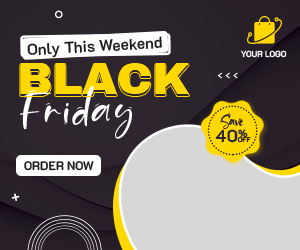
<style>
.page{position:relative;width:300px;height:250px;background:#d7d7d7}
.page>*{position:absolute;margin:0}
.t1{font:15.6px "K2D-SemiBold";color:#1d1a1c}
.t2{font:8.7px "K2D-Bold";color:#ffffff;scale:0.96 1}
.t3{font:45px "ArchivoBlack-Regular";color:#ffd800}
.t4{font:55.4px "Sand-Beach";letter-spacing:0.055em;color:#ffffff}
.t5{font:17.3px "Sand-Beach";color:#2f2730}
.t6{font:17.3px "K2D-Bold";color:#2f2730}
.t7{font:6.9px "K2D-Bold";color:#2f2730}
.t8{font:12.2px "K2D-SemiBold";color:#1d1a1c}
</style>
<div class="page">
<p class="t1" style="left:27px;top:36px;width:135px;height:22px;rotate:-3deg">Only This Weekend</p>
<p class="t2" style="left:241px;top:50px;width:46px;height:8px">YOUR LOGO</p>
<p class="t3" style="left:20px;top:63px;width:169px;height:31px">BLACK</p>
<p class="t3" style="left:20px;top:65px;width:169px;height:31px">BLACK</p>
<p class="t4" style="left:19px;top:86px;width:113px;height:53px">Friday</p>
<p class="t5" style="left:220px;top:113px;width:23px;height:16px">Save</p>
<p class="t6" style="left:215px;top:129px;width:33px;height:14px">40%</p>
<p class="t7" style="left:237px;top:136px;width:14px;height:7px">OFF</p>
<p class="t8" style="left:24px;top:161px;width:70px;height:10px">ORDER NOW</p>
</div>
